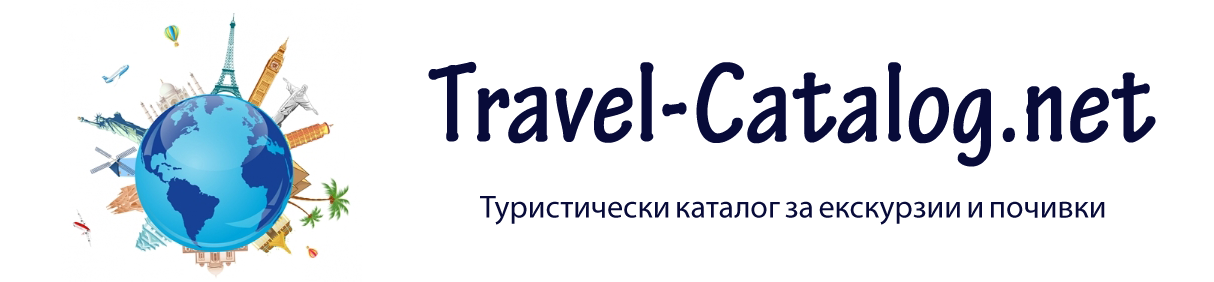
<style>
.page{position:relative;width:1214px;height:282px;background:#ffffff}
.page>*{position:absolute;margin:0}
.t1{font:120px "TektonPro-BoldCond";color:#080b39}
.t2{font:32px "MyriadPro-Regular";color:#080b39}
.t3{font:80px "VinerHandITC";color:#080b39}
</style>
<div class="page">
<p class="t1" style="left:428px;top:61px;width:728px;height:106px">Travel-Catalog.net</p>
<p class="t2" style="left:480px;top:196px;width:625px;height:29px"><span class="t3"><br></span>Туристически каталог за екскурзии и почивки</p>
</div>
